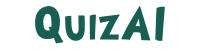
<style>
.page{position:relative;width:200px;height:50px;background:#ffffff}
.page>*{position:absolute;margin:0}
.t1{font:36px "Birdgo";color:#195e53}
.t2{font:48px "Birdgo";color:#195e53}
</style>
<div class="page">
<p class="t1" style="left:35px;top:6px;width:130px;height:38px"><span class="t2">Q</span>uiz<span class="t2">AI</span></p>
</div>
